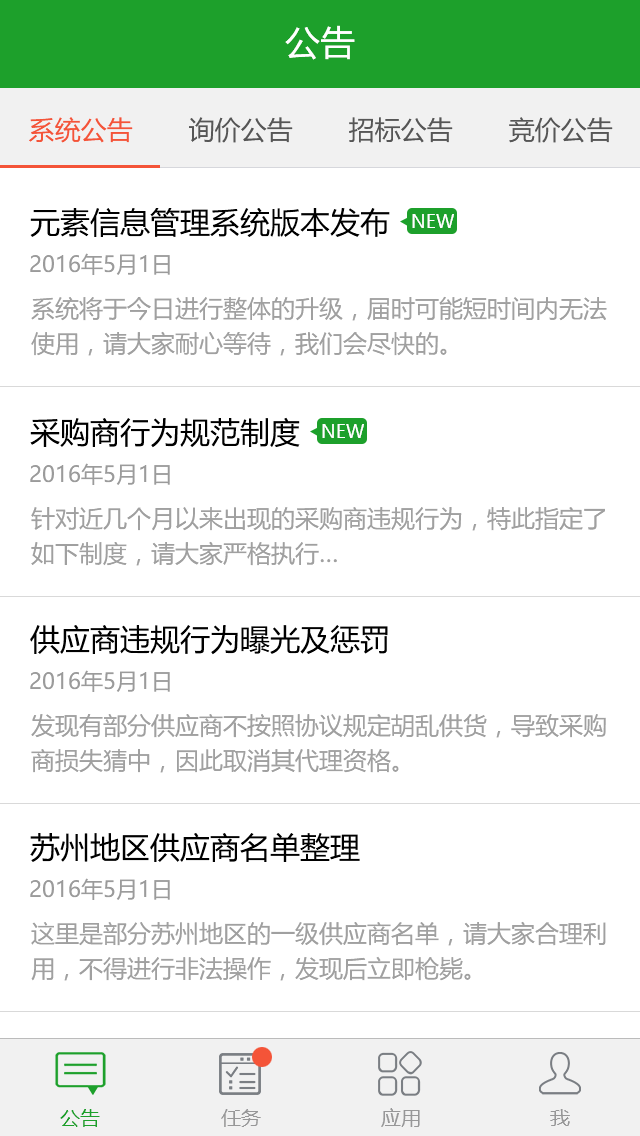
<style>
.page{position:relative;width:640px;height:1136px;background:#ffffff}
.page>*{position:absolute;margin:0}
.t1{font:35px "MicrosoftYaHei";color:#ffffff}
.t2{font:26px "MicrosoftYaHei";color:#f45438}
.t3{font:26px "MicrosoftYaHei";color:#565656}
.t4{font:30px "MicrosoftYaHei";color:#000000}
.t5{font:18px "MicrosoftYaHei";color:#ffffff}
.t6{font:22px "MicrosoftYaHei";color:#9b9b9b}
.t7{font:24px/35px "MicrosoftYaHei";color:#a0a0a0}
.t8{font:20px "MicrosoftYaHei";color:#1da02b}
.t9{font:20px "MicrosoftYaHei";color:#979798}
</style>
<div class="page">
<p class="t1" style="left:285px;top:25px;width:70px;height:35px">公告</p>
<p class="t2" style="left:29px;top:117px;width:104px;height:26px">系统公告</p>
<p class="t3" style="left:189px;top:117px;width:104px;height:26px">询价公告</p>
<p class="t3" style="left:349px;top:117px;width:104px;height:26px">招标公告</p>
<p class="t3" style="left:509px;top:117px;width:104px;height:26px">竞价公告</p>
<p class="t4" style="left:30px;top:208px;width:360px;height:29px">元素信息管理系统版本发布</p>
<p class="t5" style="left:412px;top:214px;width:42px;height:14px">NEW</p>
<p class="t6" style="left:30px;top:253px;width:140px;height:22px">2016年5月1日</p>
<p class="t7" style="left:31px;top:296px;width:576px;height:60px">系统将于今日进行整体的升级，届时可能短时间内无法使用，请大家耐心等待，我们会尽快的。</p>
<p class="t4" style="left:30px;top:417px;width:270px;height:31px">采购商行为规范制度</p>
<p class="t5" style="left:322px;top:424px;width:42px;height:14px">NEW</p>
<p class="t6" style="left:30px;top:463px;width:140px;height:22px">2016年5月1日</p>
<p class="t7" style="left:31px;top:507px;width:574px;height:59px">针对近几个月以来出现的采购商违规行为，特此指定了如下制度，请大家严格执行…</p>
<p class="t4" style="left:30px;top:625px;width:358px;height:30px">供应商违规行为曝光及惩罚</p>
<p class="t6" style="left:30px;top:670px;width:140px;height:22px">2016年5月1日</p>
<p class="t7" style="left:31px;top:714px;width:575px;height:59px">发现有部分供应商不按照协议规定胡乱供货，导致采购商损失猜中，因此取消其代理资格。</p>
<p class="t4" style="left:30px;top:833px;width:330px;height:29px">苏州地区供应商名单整理</p>
<p class="t6" style="left:30px;top:878px;width:140px;height:22px">2016年5月1日</p>
<p class="t7" style="left:31px;top:921px;width:575px;height:60px">这里是部分苏州地区的一级供应商名单，请大家合理利用，不得进行非法操作，发现后立即枪毙。</p>
<p class="t8" style="left:60px;top:1109px;width:40px;height:18px">公告</p>
<p class="t9" style="left:221px;top:1109px;width:40px;height:18px">任务</p>
<p class="t9" style="left:381px;top:1108px;width:39px;height:19px">应用</p>
<p class="t9" style="left:550px;top:1109px;width:20px;height:17px">我</p>
</div>
